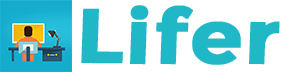
<style>
.page{position:relative;width:300px;height:72px;background:#ffffff}
.page>*{position:absolute;margin:0}
.t1{font:76.3px "Montserrat-Bold";color:#20b8c6;font-weight:bold;scale:1.12 1}
</style>
<div class="page">
<p class="t1" style="left:81px;top:5px;width:199px;height:60px">Lifer</p>
</div>
